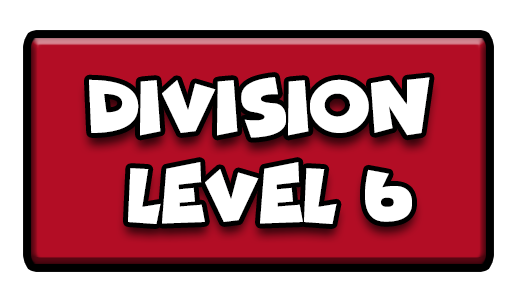
<style>
.page{position:relative;width:517px;height:301px;background:#ffffff}
.page>*{position:absolute;margin:0}
.t1{font:77.7px "Funhouse";color:#ffffff;scale:0.95 1}
</style>
<div class="page">
<p class="t1" style="left:89px;top:77px;width:341px;height:61px">DIVISION</p>
<p class="t1" style="left:128px;top:162px;width:284px;height:62px">LEVEL 6</p>
</div>
